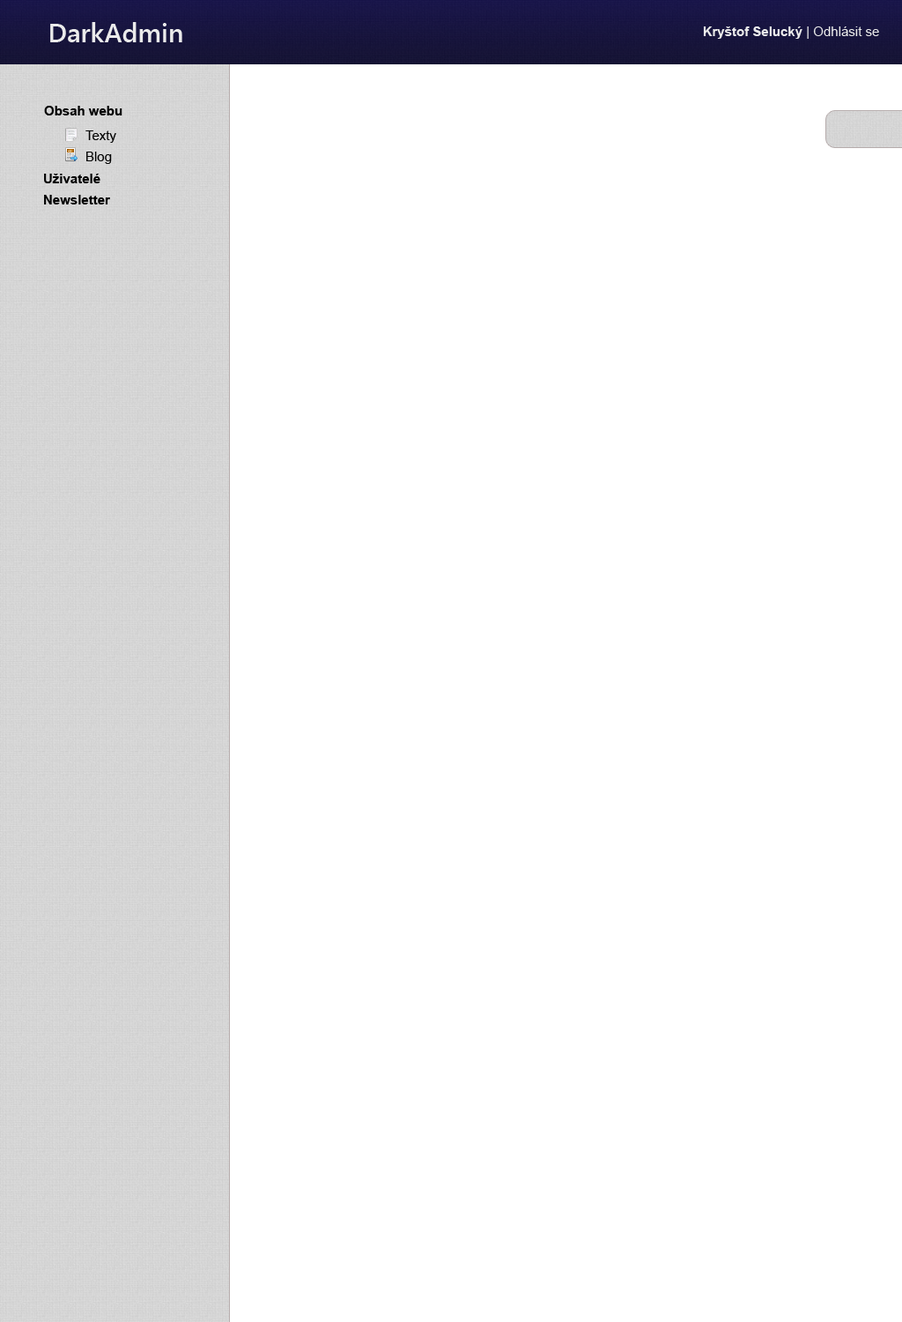
<style>
.page{position:relative;width:902px;height:1322px;background:#ffffff}
.page>*{position:absolute;margin:0}
.t1{font:26.4px "SegoeUI-SemiBold";color:#ffffff}
.t2{font:17.6px "TimesNewRomanPSMT";color:#ffffff}
.t3{font:13.2px "Arial-BoldMT";color:#ffffff}
.t4{font:13.2px "ArialMT";color:#ffffff}
.t5{font:13.2px "Arial-BoldMT";color:#000000}
.t6{font:13.2px/21.1px "ArialMT";color:#000000}
.t7{font:13.2px/21.1px "Arial-BoldMT";color:#000000}
</style>
<div class="page">
<p class="t1" style="left:50px;top:22px;width:132px;height:20px"><span class="t2">             </span>DarkAdmin</p>
<p class="t3" style="left:703px;top:26px;width:176px;height:13px">Kryštof Selucký<span class="t4"> | Odhlásit se</span></p>
<p class="t5" style="left:44px;top:106px;width:78px;height:9px">Obsah webu</p>
<p class="t6" style="left:85px;top:130px;width:31px;height:34px">Texty<br>Blog</p>
<p class="t7" style="left:44px;top:174px;width:66px;height:30px">Uživatelé<br>Newsletter</p>
</div>
